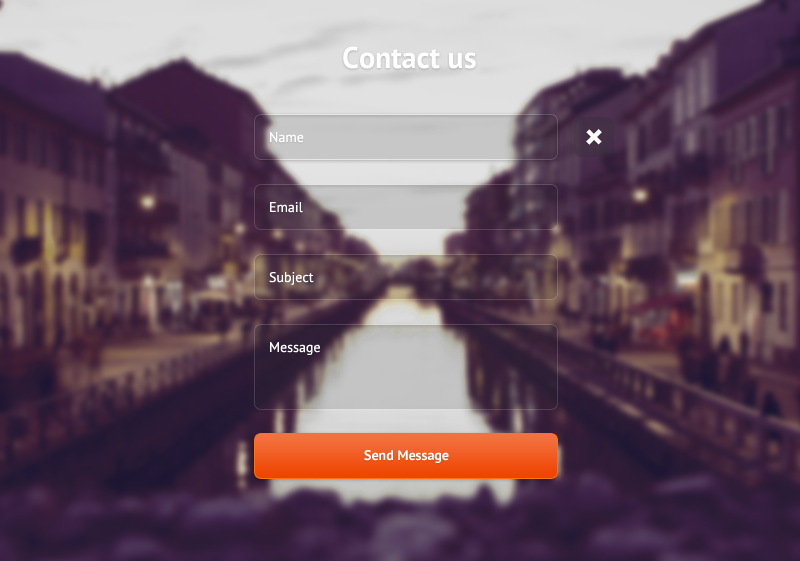
<style>
.page{position:relative;width:800px;height:561px}
.page>*{position:absolute;margin:0}
.t1{font:30px "PTSans-Bold";color:#ffffff}
.t2{font:14px "PTSans-Regular";color:#ffffff}
.t3{font:40px "PTSans-Bold";color:#ffffff}
.t4{font:14px "PTSans-Bold";color:#ffffff}
</style>
<div class="page">
<p class="t1" style="left:343px;top:46px;width:133px;height:23px">Contact us</p>
<p class="t2" style="left:270px;top:132px;width:34px;height:11px">Name</p>
<p class="t3" style="left:586px;top:129px;width:16px;height:16px;rotate:45deg">+</p>
<p class="t2" style="left:270px;top:202px;width:33px;height:11px">Email</p>
<p class="t2" style="left:269px;top:272px;width:45px;height:13px">Subject</p>
<p class="t2" style="left:270px;top:342px;width:50px;height:13px">Message</p>
<p class="t4" style="left:364px;top:450px;width:85px;height:13px">Send Message</p>
</div>
